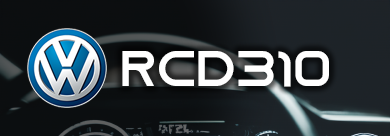
<style>
.page{position:relative;width:390px;height:136px}
.page>*{position:absolute;margin:0}
.t1{font:50px "AzonixRegular";color:#ffffff}
</style>
<div class="page">
<p class="t1" style="left:122px;top:51px;width:207px;height:36px">RCD310</p>
</div>
